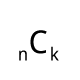
<style>
.page{position:relative;width:80px;height:80px;background:#ffffff}
.page>*{position:absolute;margin:0}
.t1{font:31.8px "DroidSans";color:#000000}
.t2{font:18px "DroidSans";color:#000000}
</style>
<div class="page">
<p class="t1" style="left:30px;top:30px;width:17px;height:24px">C</p>
<p class="t2" style="left:19px;top:50px;width:8px;height:11px">n</p>
<p class="t2" style="left:51px;top:46px;width:8px;height:15px">k</p>
</div>
